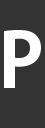
<style>
.page{position:relative;width:45px;height:128px;background:#333333}
.page>*{position:absolute;margin:0}
.t1{font:75px "AdobeGothicStd-Bold";color:#ffffff}
</style>
<div class="page">
<p class="t1" style="left:4px;top:30px;width:37px;height:58px">P</p>
</div>
